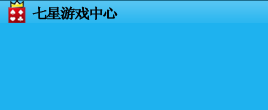
<style>
.page{position:relative;width:268px;height:110px;background:#1eb2ef}
.page>*{position:absolute;margin:0}
.t1{font:13.7px "SimSun";letter-spacing:-0.08em;color:#000000;font-weight:bold;scale:1.09 1}
</style>
<div class="page">
<p class="t1" style="left:32px;top:6px;width:86px;height:14px">七星游戏中心</p>
</div>
